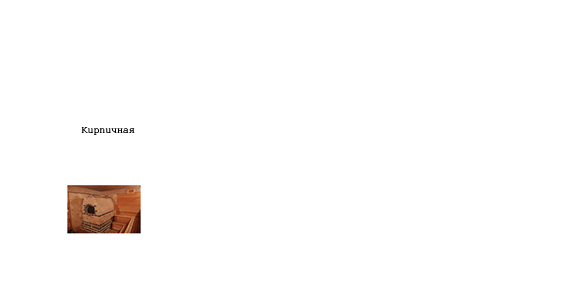
<style>
.page{position:relative;width:570px;height:303px;background:#ffffff}
.page>*{position:absolute;margin:0}
.t1{font:10px "Courier";letter-spacing:0.025em;color:#000000}
</style>
<div class="page">
<p class="t1" style="left:81px;top:127px;width:54px;height:8px">Кирпичная</p>
</div>
